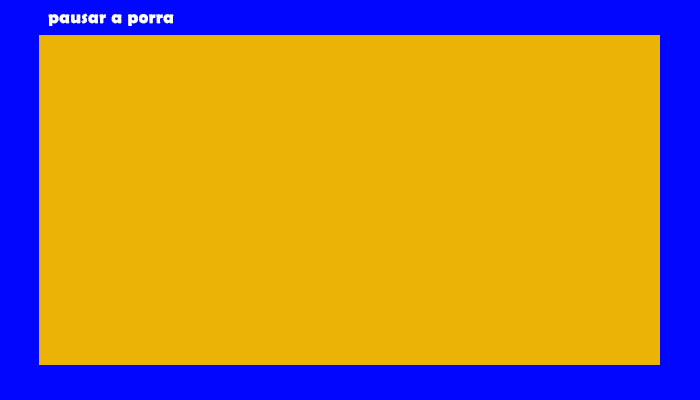
<style>
.page{position:relative;width:700px;height:400px;background:#ecb307}
.page>*{position:absolute;margin:0}
.t1{font:18px "BerlinSansFBDemi-Bold";letter-spacing:0.025em;color:#fefefe}
</style>
<div class="page">
<p class="t1" style="left:48px;top:13px;width:126px;height:13px">pausar a porra</p>
</div>
